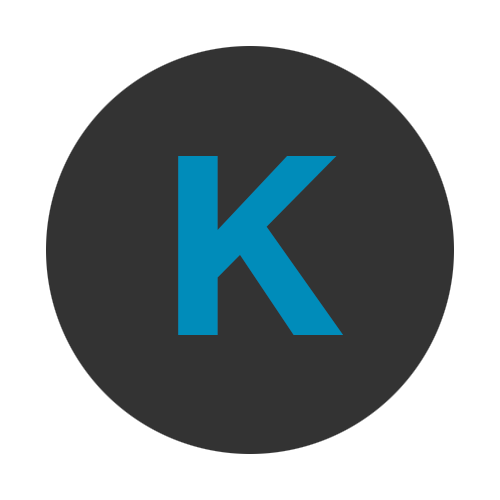
<style>
.page{position:relative;width:500px;height:500px;background:#ffffff}
.page>*{position:absolute;margin:0}
.t1{font:250px "HelveticaNeue-Bold";color:#008cba}
</style>
<div class="page">
<p class="t1" style="left:178px;top:156px;width:165px;height:179px">K</p>
</div>
